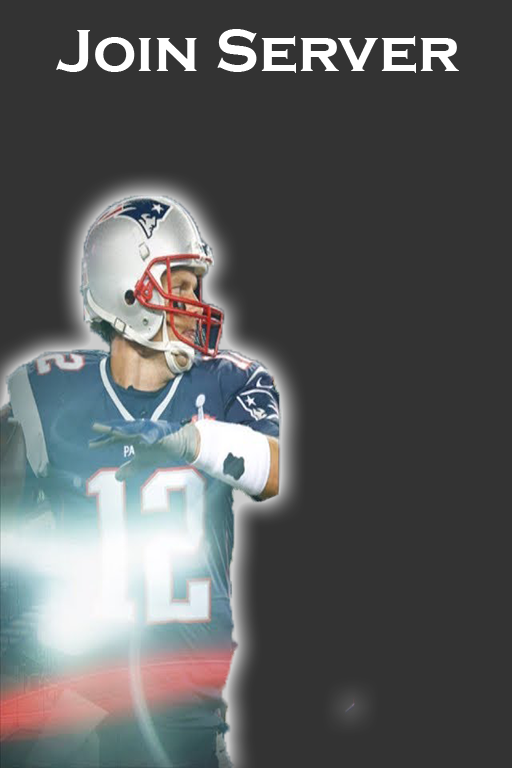
<style>
.page{position:relative;width:512px;height:768px;background:#333333}
.page>*{position:absolute;margin:0}
.t1{font:61px "CopperplateGothic-Bold";color:#ffffff}
</style>
<div class="page">
<p class="t1" style="left:56px;top:29px;width:403px;height:44px">Join Server</p>
</div>
